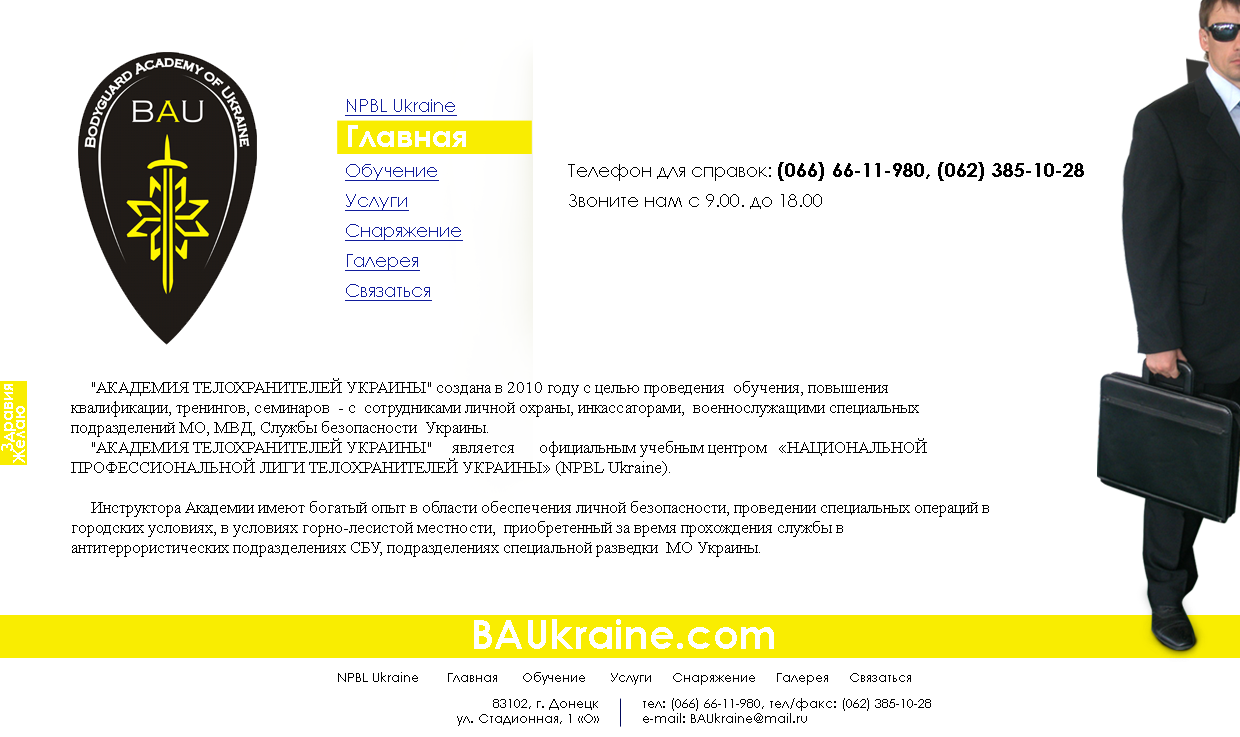
<style>
.page{position:relative;width:1240px;height:737px;background:#ffffff}
.page>*{position:absolute;margin:0}
.t1{font:18px/30px "CenturyGothic";color:#111d9c;text-decoration:underline}
.t2{font:18px/35px "CenturyGothic";color:#111d9c;text-decoration:underline}
.t3{font:31px/35px "CenturyGothic-Bold";color:#ffffff}
.t4{font:20px/30px "CenturyGothic-Bold";color:#000000}
.t5{font:18px/30px "CenturyGothic";color:#000000}
.t6{font:16px/12px "CenturyGothic-Bold";color:#ffffff}
.t7{font:17px/20px "TimesNewRomanPSMT";color:#000000}
.t8{font:41px "CenturyGothic-Bold";color:#ffffff}
.t9{font:13px "CenturyGothic";color:#000000}
</style>
<div class="page">
<p class="t1" style="left:345px;top:99px;width:121px;height:202px"><span class="t2">NPBL Ukraine<br></span><span class="t3">Главная<br></span>Обучение<br>Услуги<br>Снаряжение<br>Галерея<br>Связаться</p>
<p class="t4" style="left:568px;top:162px;width:516px;height:47px"><span class="t5">Телефон для справок: </span>(066) 66-11-980, (062) 385-10-28 <br><span class="t5">Звоните нам с 9.00. до 18.00</span></p>
<p class="t6" style="left:1px;top:384px;width:24px;height:79px;rotate:-90deg">Здравия<br>Желаю</p>
<p class="t7" style="left:71px;top:378px;width:918px;height:179px">"АКАДЕМИЯ ТЕЛОХРАНИТЕЛЕЙ УКРАИНЫ" создана в 2010 году с целью проведения  обучения, повышения квалификации, тренингов, семинаров  - с  сотрудниками личной охраны, инкассаторами,  военнослужащими специальных подразделений МО, МВД, Службы безопасности  Украины. <br>     "АКАДЕМИЯ ТЕЛОХРАНИТЕЛЕЙ УКРАИНЫ"     является      официальным учебным центром   «НАЦИОНАЛЬНОЙ ПРОФЕССИОНАЛЬНОЙ ЛИГИ ТЕЛОХРАНИТЕЛЕЙ УКРАИНЫ» (NPBL Ukraine).<br><br>     Инструктора Академии имеют богатый опыт в области обеспечения личной безопасности, проведении специальных операций в городских условиях, в условиях горно-лесистой местности,  приобретенный за время прохождения службы в антитеррористических подразделениях СБУ, подразделениях специальной разведки  МО Украины.</p>
<p class="t8" style="left:474px;top:619px;width:300px;height:30px">BAUkraine.com</p>
<p class="t9" style="left:338px;top:672px;width:573px;height:13px">NPBL Ukraine       Главная      Обучение      Услуги     Снаряжение     Галерея     Связаться</p>
<p class="t9" style="left:457px;top:699px;width:142px;height:27px;text-align:right">83102, г. Донецк<br>ул. Стадионная, 1 «О»</p>
<p class="t9" style="left:643px;top:698px;width:288px;height:25px">тел: (066) 66-11-980, тел/факс: (062) 385-10-28<br>e-mail: BAUkraine@mail.ru</p>
</div>
